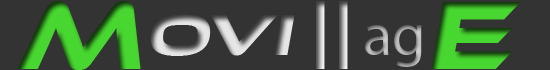
<style>
.page{position:relative;width:550px;height:70px;background:#333333}
.page>*{position:absolute;margin:0}
.t1{font:100px "EthnocentricRg-Italic";color:#48d730}
.t2{font:96px "MyriadPro-Regular"}
.t3{font:60px "EthnocentricRg-Italic"}
.t4{font:60px "MyriadPro-Regular"}
</style>
<div class="page">
<p class="t1" style="left:17px;top:1px;width:124px;height:69px">M</p>
<p class="t2" style="left:316px;top:1px;width:32px;height:68px">ll</p>
<p class="t1" style="left:431px;top:2px;width:90px;height:67px">E</p>
<p class="t3" style="left:150px;top:14px;width:145px;height:42px">OVI</p>
<p class="t4" style="left:365px;top:25px;width:57px;height:42px">ag</p>
</div>
